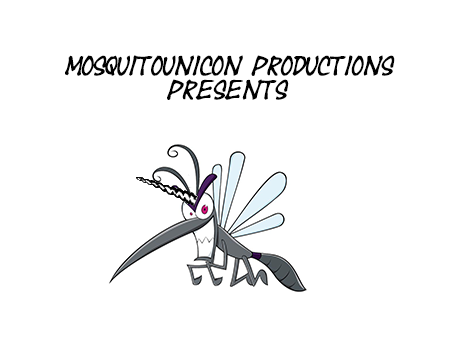
<style>
.page{position:relative;width:454px;height:340px;background:#ffffff}
.page>*{position:absolute;margin:0}
.t1{font:20px "Yearsupplyoffairycakes";color:#010101}
</style>
<div class="page">
<p class="t1" style="left:65px;top:55px;width:330px;height:45px">MosquitoUnicon Productions<br>     presents</p>
</div>
